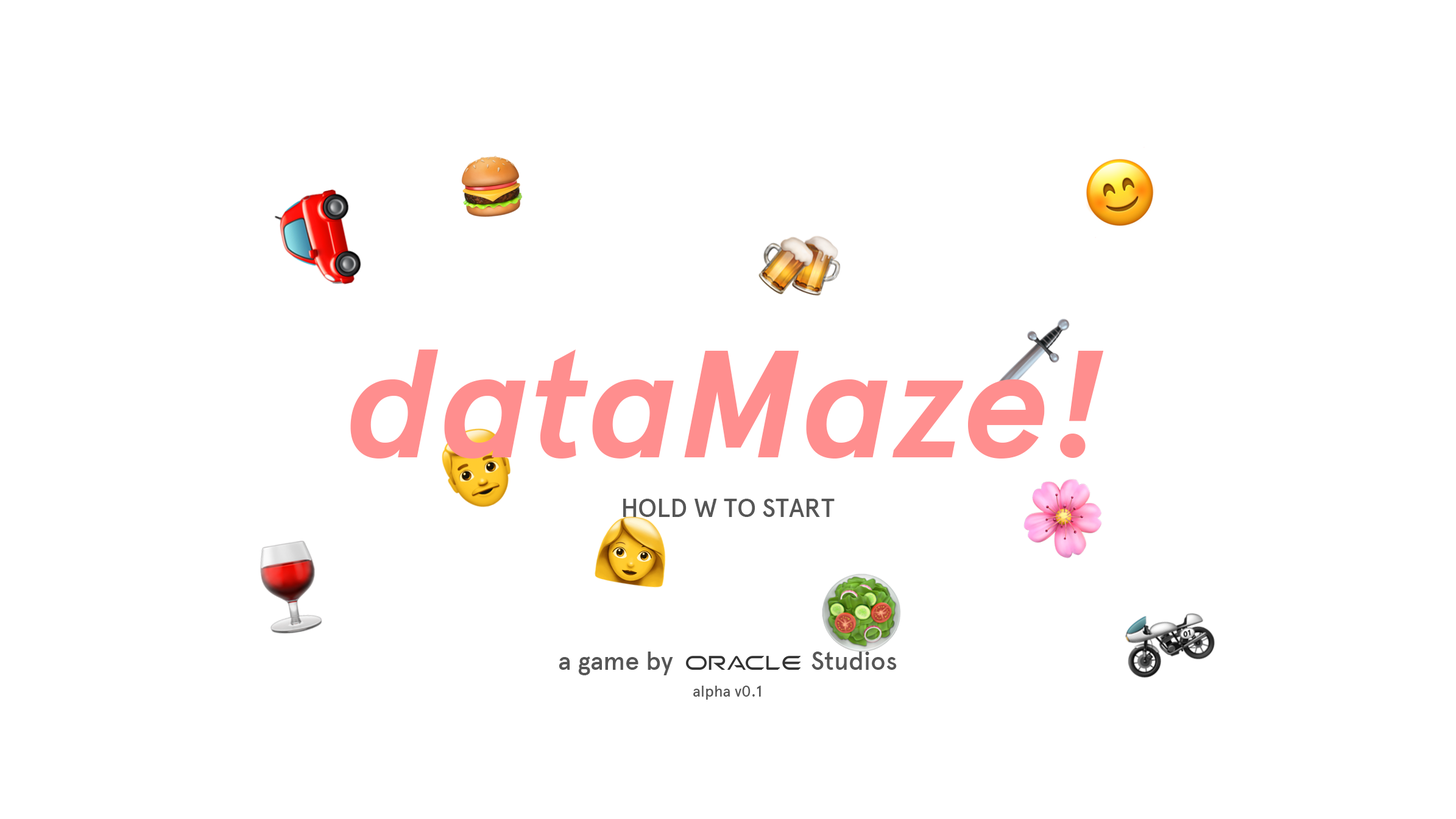
<style>
.page{position:relative;width:1456px;height:819px;background:#ffffff}
.page>*{position:absolute;margin:0}
.t1{font:152.3px "Apercu-BoldItalic";color:#ff8e8e}
.t2{font:25.4px "Apercu-Medium";color:#565656}
.t3{font:15.2px "Apercu-Medium";color:#565656}
</style>
<div class="page">
<p class="t1" style="left:350px;top:350px;width:754px;height:109px">dataMaze!</p>
<p class="t2" style="left:623px;top:499px;width:211px;height:18px">HOLD W TO START</p>
<p class="t2" style="left:559px;top:652px;width:338px;height:23px">a game by                     Studios</p>
<p class="t3" style="left:693px;top:686px;width:68px;height:14px">alpha v0.1</p>
</div>
